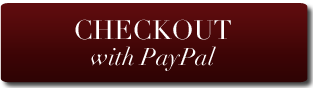
<style>
.page{position:relative;width:313px;height:88px}
.page>*{position:absolute;margin:0}
.t1{font:24px/26.4px "Didot-Italic";color:#ffffff}
.t2{font:26.4px/26.4px "Didot";color:#ffffff;text-transform:uppercase}
</style>
<div class="page">
<p class="t1" style="left:75px;top:19px;width:156px;height:52px;text-align:center"><span class="t2">checkout<br></span>with PayPal</p>
</div>
